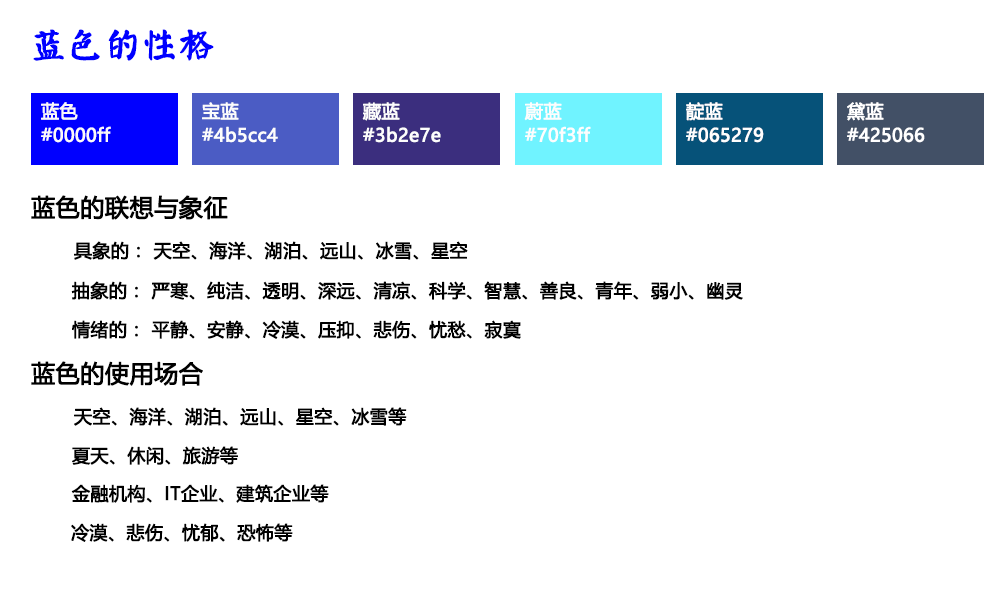
<style>
.page{position:relative;width:1000px;height:600px;background:#ffffff}
.page>*{position:absolute;margin:0}
.t1{font:36px "øów·»îów©I";color:#0000ff;font-weight:bold}
.t2{font:18px/24px "MicrosoftYaHei";color:#fbf9f9;font-weight:bold}
.t3{font:18px/24px "MicrosoftYaHei";color:#fcfcfc;font-weight:bold}
.t4{font:18px/24px "MicrosoftYaHei";color:#fdfdfd;font-weight:bold}
.t5{font:18px/24px "MicrosoftYaHei";color:#fefdfd;font-weight:bold}
.t6{font:18px/24px "MicrosoftYaHei";color:#fefefe;font-weight:bold}
.t7{font:18px/24px "MicrosoftYaHei";color:#ffffff;font-weight:bold}
.t8{font:24px "MicrosoftYaHei";color:#000000;font-weight:bold}
.t9{font:18px "MicrosoftYaHei";color:#000000;font-weight:bold}
</style>
<div class="page">
<p class="t1" style="left:33px;top:29px;width:181px;height:32px">蓝色的性格</p>
<p class="t2" style="left:41px;top:102px;width:70px;height:41px">蓝色<br>#0000ff</p>
<p class="t3" style="left:202px;top:102px;width:76px;height:41px">宝蓝<br>#4b5cc4</p>
<p class="t4" style="left:362px;top:102px;width:79px;height:41px">藏蓝<br>#3b2e7e</p>
<p class="t5" style="left:524px;top:102px;width:67px;height:41px">蔚蓝<br>#70f3ff</p>
<p class="t6" style="left:686px;top:102px;width:78px;height:41px">靛蓝<br>#065279</p>
<p class="t7" style="left:847px;top:102px;width:78px;height:41px">黛蓝<br>#425066</p>
<p class="t8" style="left:31px;top:195px;width:197px;height:25px">蓝色的联想与象征</p>
<p class="t9" style="left:74px;top:241px;width:394px;height:19px">具象的： 天空、海洋、湖泊、远山、冰雪、星空</p>
<p class="t9" style="left:71px;top:281px;width:672px;height:19px">抽象的： 严寒、纯洁、透明、深远、清凉、科学、智慧、善良、青年、弱小、幽灵</p>
<p class="t9" style="left:72px;top:320px;width:449px;height:19px">情绪的： 平静、安静、冷漠、压抑、悲伤、忧愁、寂寞</p>
<p class="t8" style="left:31px;top:361px;width:172px;height:25px">蓝色的使用场合</p>
<p class="t9" style="left:74px;top:407px;width:333px;height:19px">天空、海洋、湖泊、远山、星空、冰雪等</p>
<p class="t9" style="left:72px;top:446px;width:166px;height:19px">夏天、休闲、旅游等</p>
<p class="t9" style="left:71px;top:484px;width:258px;height:19px">金融机构、IT企业、建筑企业等</p>
<p class="t9" style="left:71px;top:523px;width:222px;height:19px">冷漠、悲伤、忧郁、恐怖等</p>
</div>
